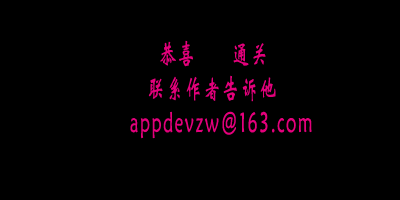
<style>
.page{position:relative;width:400px;height:200px;background:#000000}
.page>*{position:absolute;margin:0}
.t1{font:28px "STXinwei";letter-spacing:0.1em;color:#e3007b;scale:0.61 1}
</style>
<div class="page">
<p class="t1" style="left:130px;top:40px;width:182px;height:99px">恭喜 通关<br><br>      联系作者告诉他<br> <br>   appdevzw@163.com</p>
</div>
